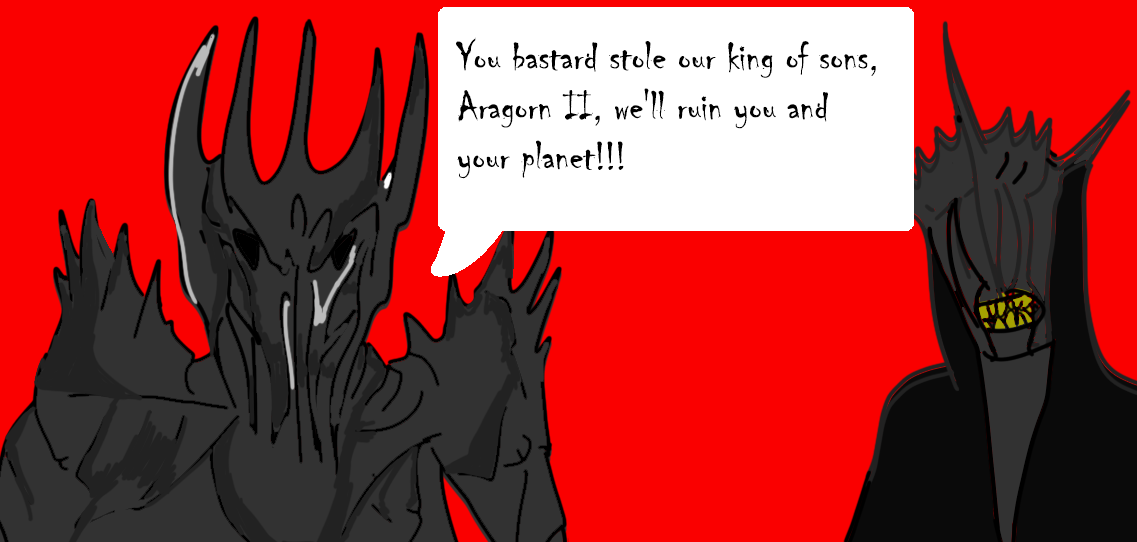
<style>
.page{position:relative;width:1137px;height:542px;background:#fa0000}
.page>*{position:absolute;margin:0}
.t1{font:41.5px "Chiller-Regular";color:#000000}
</style>
<div class="page">
<p class="t1" style="left:456px;top:37px;width:420px;height:142px">You bastard stole our king of sons, <br>Aragorn II, we'll ruin you and <br>your planet!!!</p>
</div>
